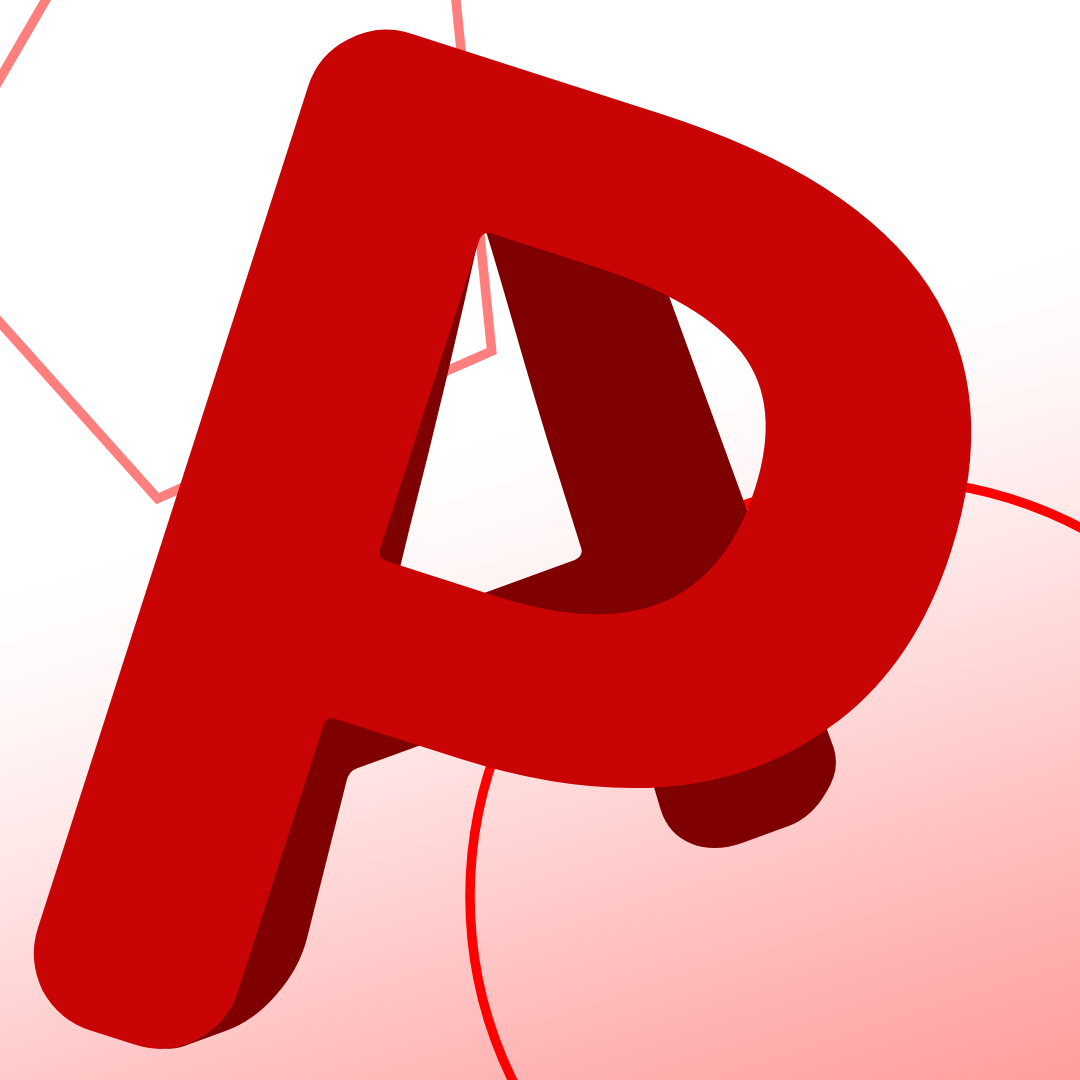
<style>
.page{position:relative;width:1080px;height:1080px;background:#c80404}
.page>*{position:absolute;margin:0}
.t1{font:1414.6px "GenJyuuGothic-Bold";color:#c80404}
.t2{font:1128.6px "GenJyuuGothic-Bold";scale:1.06 1}
</style>
<div class="page">
<p class="t1" style="left:33px;top:29px;width:939px;height:1020px;rotate:18deg">P</p>
<p class="t2" style="left:138px;top:83px;width:698px;height:966px;rotate:-20deg">A</p>
</div>
